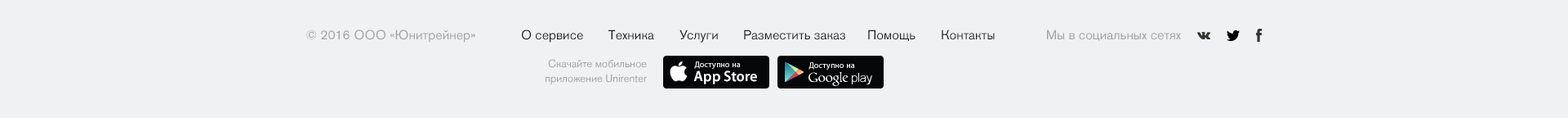
<style>
.page{position:relative;width:1568px;height:118px;background:#f0f1f2}
.page>*{position:absolute;margin:0}
.t1{font:13.1px "AkzidenzGroteskPro-Regular";color:#a1a2a3}
.t2{font:13.1px "AkzidenzGroteskPro-Regular";color:#1d1d1d}
.t3{font:10.6px/14.7px "AkzidenzGroteskPro-Regular";color:#a1a2a3}
.t4{font:8.2px/13.9px "MyriadPro-Regular";color:#ffffff}
.t5{font:14.7px/13.9px "MyriadPro-Semibold";color:#ffffff}
.t6{font:8.2px "MyriadPro-Regular";color:#ffffff}
</style>
<div class="page">
<p class="t1" style="left:306px;top:29px;width:169px;height:13px">© 2016 ООО «Юнитрейнер»</p>
<p class="t2" style="left:522px;top:29px;width:61px;height:13px">О сервисе</p>
<p class="t2" style="left:608px;top:29px;width:46px;height:11px">Техника</p>
<p class="t2" style="left:679px;top:29px;width:39px;height:13px">Услуги</p>
<p class="t2" style="left:744px;top:29px;width:101px;height:11px">Разместить заказ</p>
<p class="t2" style="left:868px;top:29px;width:47px;height:12px">Помощь</p>
<p class="t2" style="left:942px;top:29px;width:53px;height:11px">Контакты</p>
<p class="t1" style="left:1047px;top:29px;width:134px;height:12px">Мы в социальных сетях</p>
<p class="t3" style="left:546px;top:59px;width:101px;height:25px;text-align:right">Скачайте мобильное<br>приложение Unirenter</p>
<p class="t4" style="left:693px;top:61px;width:64px;height:23px">Доступно на<br><span class="t5">App Store</span></p>
<p class="t6" style="left:808px;top:62px;width:46px;height:7px">Доступно на</p>
</div>
